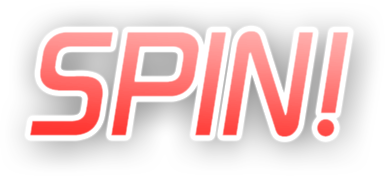
<style>
.page{position:relative;width:386px;height:176px}
.page>*{position:absolute;margin:0}
.t1{font:155.8px "DigitalEF-MediumItalic"}
</style>
<div class="page">
<p class="t1" style="left:29px;top:30px;width:320px;height:107px">SPIN!</p>
</div>
